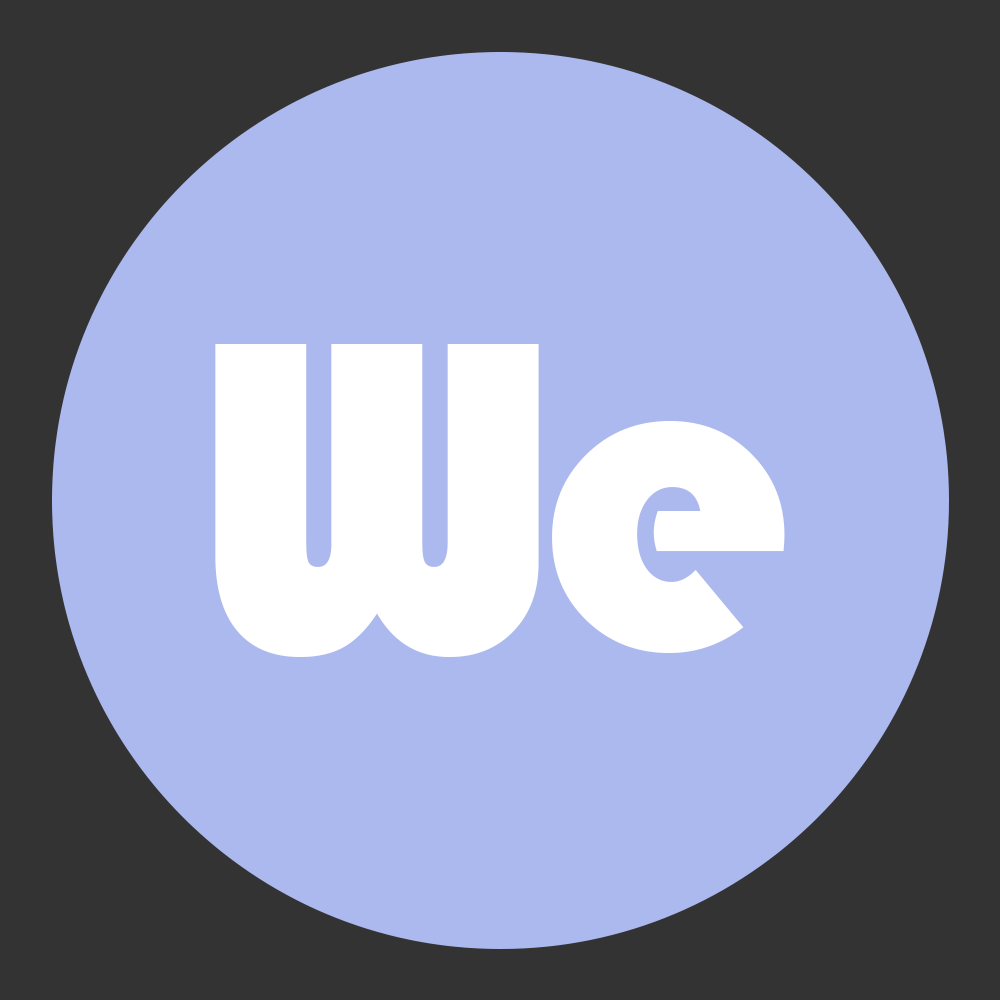
<style>
.page{position:relative;width:1000px;height:1000px;background:#acb9ee}
.page>*{position:absolute;margin:0}
.t1{font:457.7px "Bauhaus93";letter-spacing:-0.05em;color:#ffffff}
</style>
<div class="page">
<p class="t1" style="left:215px;top:344px;width:570px;height:313px">We</p>
</div>
